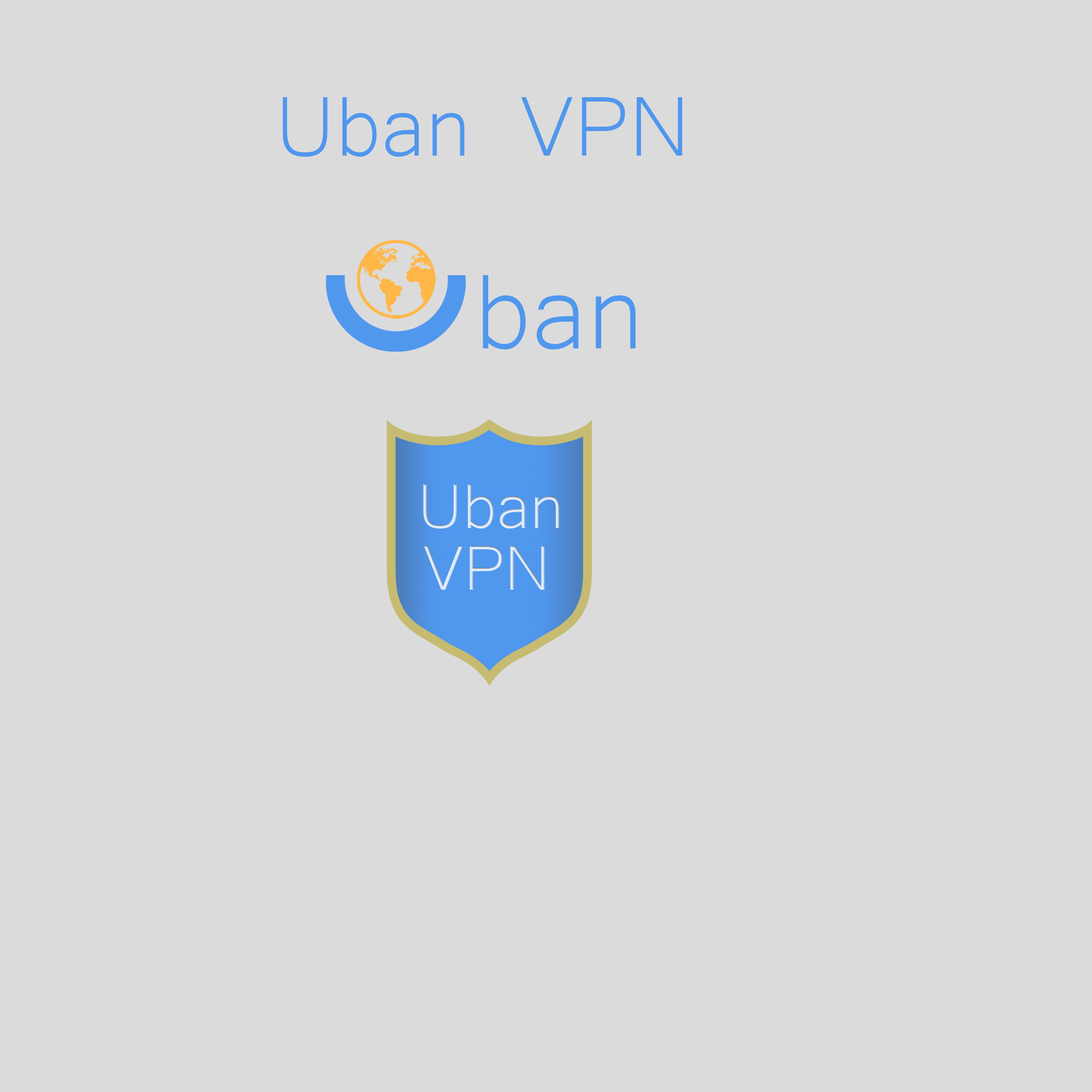
<style>
.page{position:relative;width:1092px;height:1092px;background:#dbdbdb}
.page>*{position:absolute;margin:0}
.t1{font:109.2px "Microsoft-Yi-Baiti";color:#5097ee}
.t2{font:136.5px "Microsoft-Yi-Baiti";color:#5097ee}
</style>
<div class="page">
<p class="t1" style="left:282px;top:97px;width:400px;height:60px">Uban VPN</p>
<p class="t2" style="left:483px;top:275px;width:153px;height:74px">ban</p>
</div>
